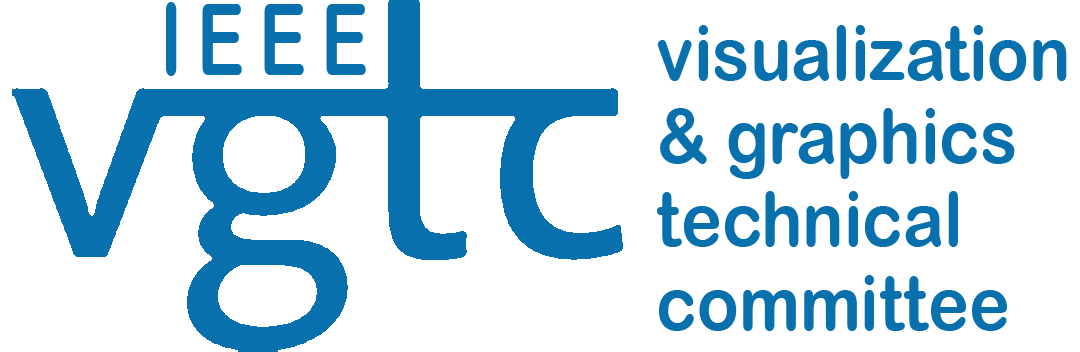
<style>
.page{position:relative;width:1080px;height:352px;background:#ffffff}
.page>*{position:absolute;margin:0}
.t1{font:100px "ArialRoundedMTBold";letter-spacing:0.21em;color:#0770ad;scale:0.71 1}
.t2{font:75.6px/83.3px "ArialRoundedMTBold";color:#0770ad;scale:0.91 1}
</style>
<div class="page">
<p class="t1" style="left:166px;top:2px;width:200px;height:74px">IEEE</p>
<p class="t2" style="left:657px;top:25px;width:410px;height:306px">visualization<br>&amp; graphics<br>technical<br>committee</p>
</div>
